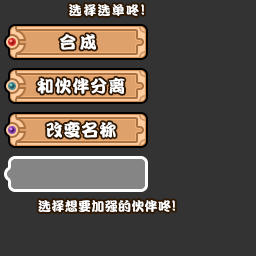
<style>
.page{position:relative;width:256px;height:256px;background:#333333}
.page>*{position:absolute;margin:0}
.t1{font:13px "DFPKanTingLiuW9";letter-spacing:0.1em;color:#ffffff}
.t2{font:15px "DFPKanTingLiuW9";letter-spacing:0.1em;color:#ffffff}
.t3{font:17px "DFPKanTingLiuW9";letter-spacing:0.2em;color:#ffffff}
.t4{font:17px "DFPKanTingLiuW9";letter-spacing:0.05em;color:#ffffff}
.t5{font:13px "DFPKanTingLiuW9";letter-spacing:0.025em;color:#ffffff}
.t6{font:15px "DFPKanTingLiuW9";letter-spacing:0.025em;color:#ffffff}
</style>
<div class="page">
<p class="t1" style="left:69px;top:4px;width:75px;height:12px">选择选单咚<span class="t2">!</span></p>
<p class="t3" style="left:60px;top:34px;width:36px;height:16px">合成</p>
<p class="t4" style="left:37px;top:77px;width:88px;height:17px">和伙伴分离</p>
<p class="t4" style="left:46px;top:121px;width:70px;height:17px">改变名称</p>
<p class="t5" style="left:38px;top:200px;width:137px;height:12px">选择想要加强的伙伴咚<span class="t6">!</span></p>
</div>
